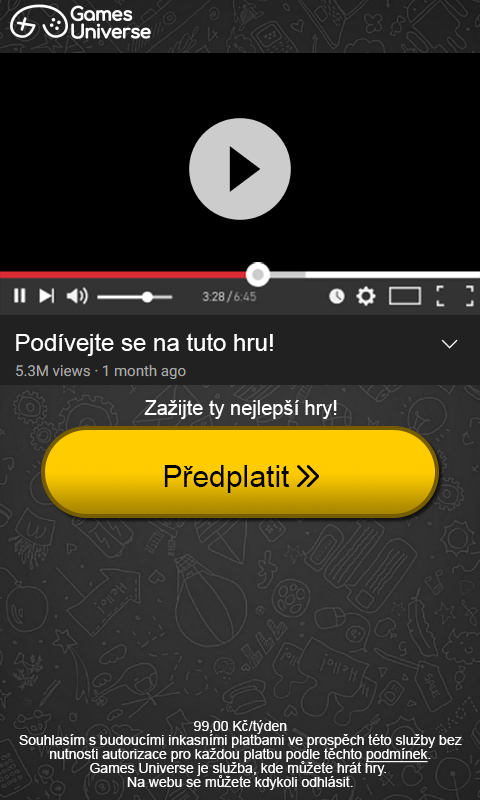
<style>
.page{position:relative;width:480px;height:800px;background:#000000}
.page>*{position:absolute;margin:0}
.t1{font:24px "ArialMT";color:#ffffff}
.t2{font:20px "ArialMT";color:#ffffff}
.t3{font:30px "ArialMT";color:#000000}
.t4{font:14px/14px "ArialMT";color:#ffffff}
.t5{font:14px "ArialMT";color:#ffffff}
.t6{font:14px/14px "ArialMT";color:#ffffff;text-decoration:underline}
</style>
<div class="page">
<p class="t1" style="left:16px;top:333px;width:257px;height:23px">Podívejte se na tuto hru!</p>
<p class="t2" style="left:144px;top:400px;width:193px;height:19px">Zažijte ty nejlepší hry!</p>
<p class="t3" style="left:164px;top:465px;width:125px;height:28px">Předplatit</p>
<p class="t4" style="left:19px;top:720px;width:443px;height:70px;text-align:center"><span class="t5">99,00 Kč/týden<br></span>Souhlasím s budoucími inkasními platbami ve prospěch této služby bez<br>nutnosti autorizace pro každou platbu podle těchto <span class="t6">podmínek</span>.<br>Games Universe je služba, kde můžete hrát hry. <br>Na webu se můžete kdykoli odhlásit.</p>
</div>
